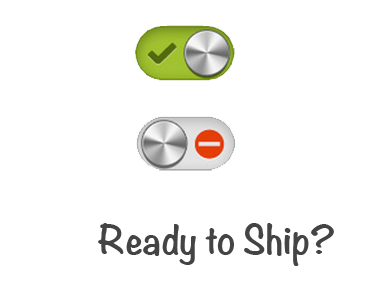
<style>
.page{position:relative;width:384px;height:300px;background:#ffffff}
.page>*{position:absolute;margin:0}
.t1{font:36px "Noteworthy-Bold";color:#454444}
</style>
<div class="page">
<p class="t1" style="left:98px;top:223px;width:236px;height:43px">Ready to Ship?</p>
</div>
